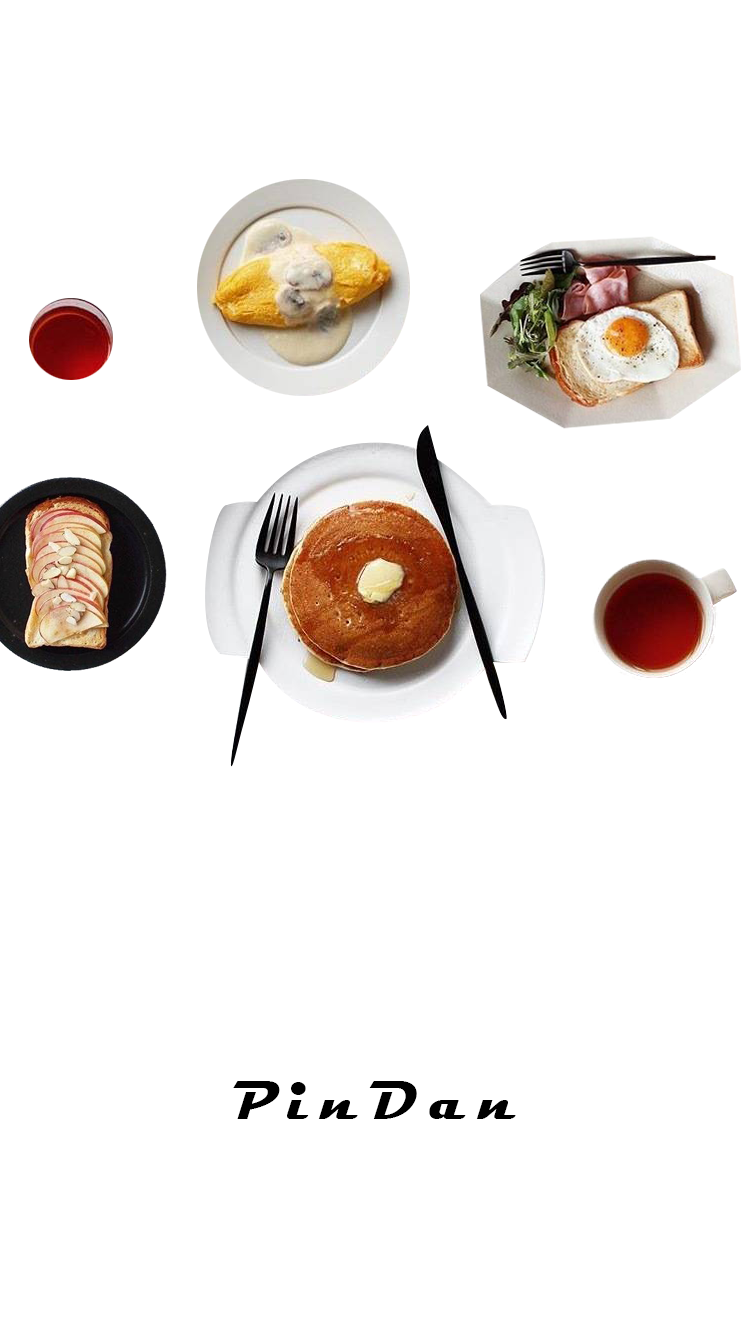
<style>
.page{position:relative;width:750px;height:1334px;background:#ffffff}
.page>*{position:absolute;margin:0}
.t1{font:56.3px "Magneto-Bold";letter-spacing:0.214em;color:#000000}
</style>
<div class="page">
<p class="t1" style="left:233px;top:1081px;width:283px;height:38px">PinDan</p>
</div>
